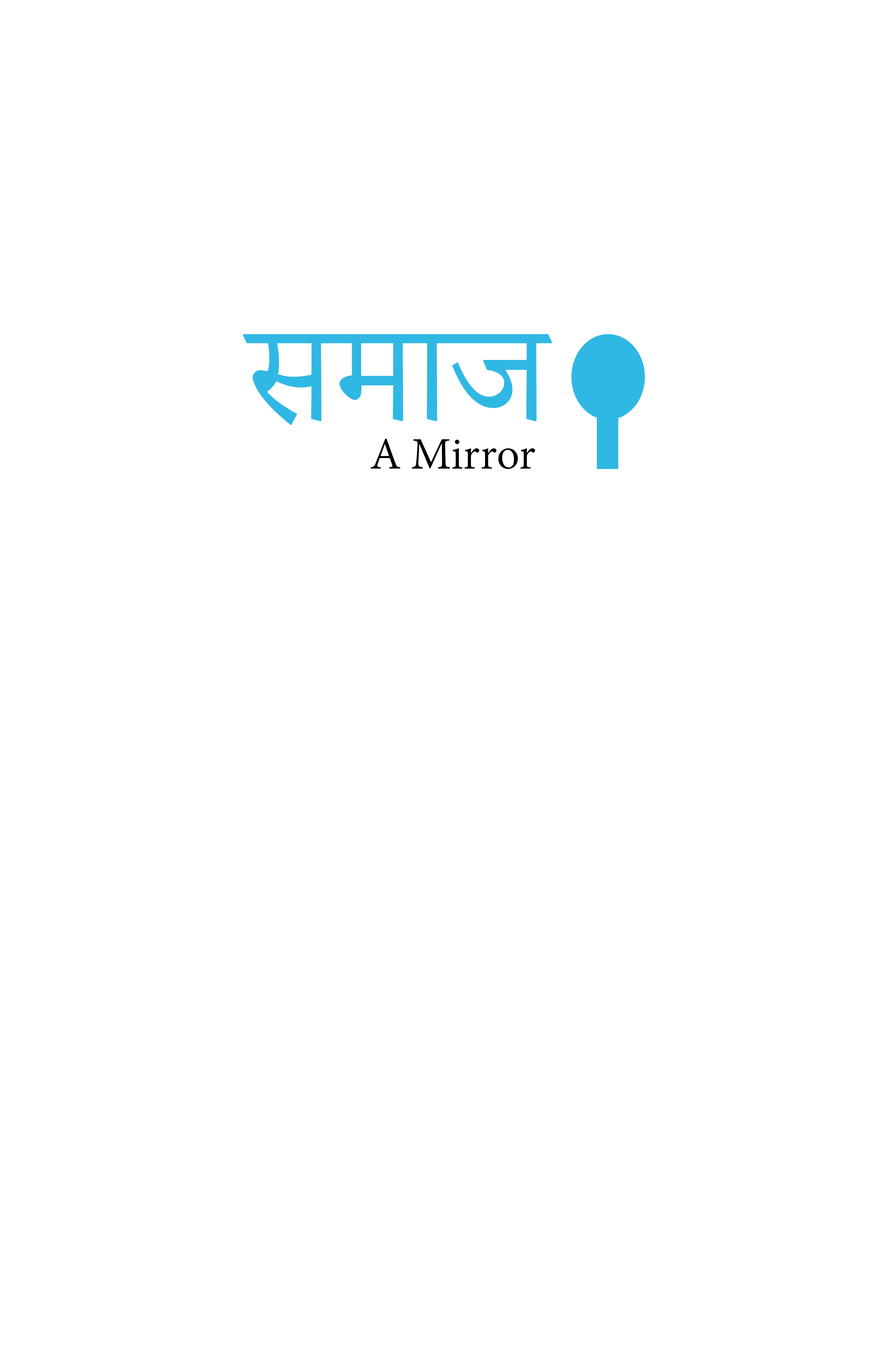
<style>
.page{position:relative;width:870px;height:1371px;background:#ffffff}
.page>*{position:absolute;margin:0}
.t1{font:172.6px "AdobeDevanagari-Regular";color:#30b8e4}
.t2{font:133.5px "MyriadPro-Regular";color:#30b8e4}
.t3{font:48.8px "AdobeDevanagari-Regular";color:#000000}
</style>
<div class="page">
<p class="t1" style="left:243px;top:334px;width:309px;height:91px"><span class="t2"> </span>समाज</p>
<p class="t3" style="left:370px;top:438px;width:165px;height:31px">A Mirror</p>
</div>
